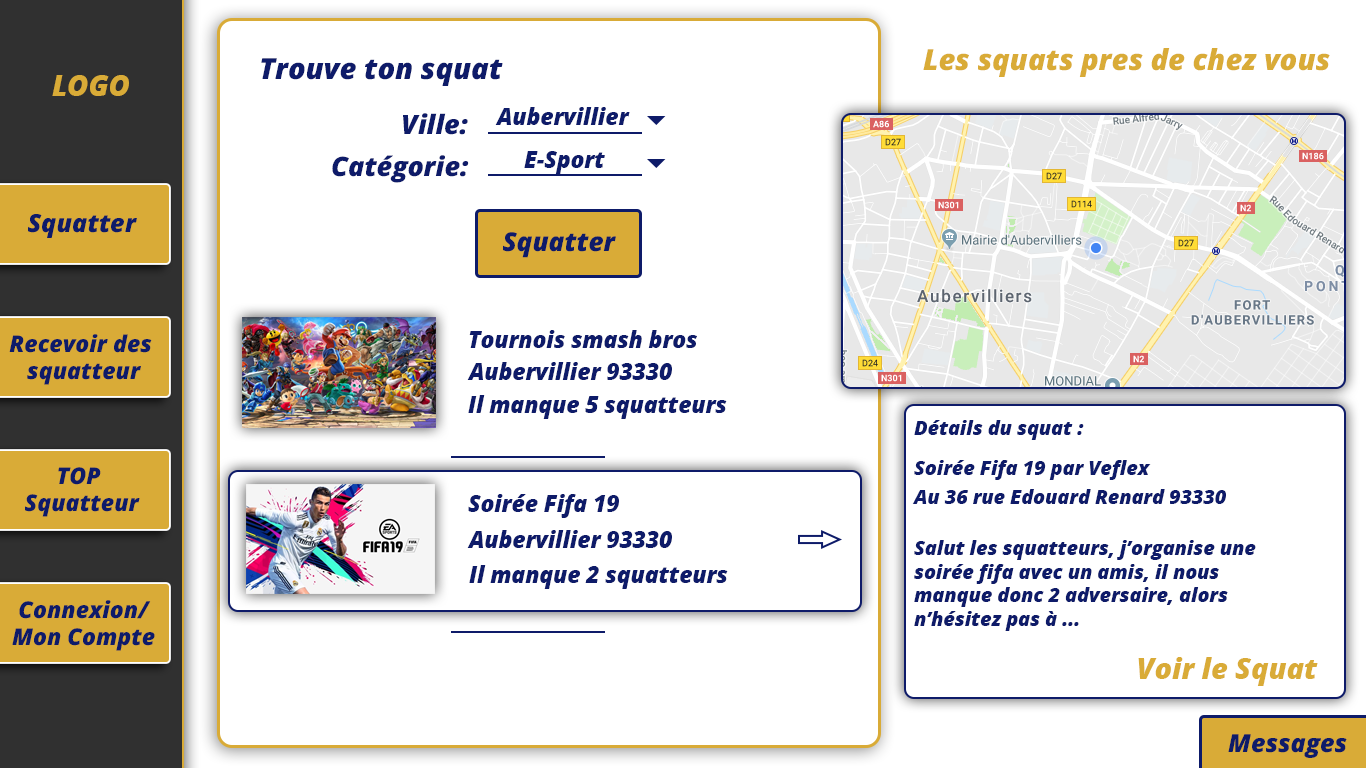
<style>
.page{position:relative;width:1366px;height:768px;background:#ffffff}
.page>*{position:absolute;margin:0}
.t1{font:29px "OpenSans-ExtraBoldItalic";color:#d9ab37}
.t2{font:29px "OpenSans-ExtraBoldItalic";color:#0e1b69}
.t3{font:28.9px "OpenSans-ExtraBoldItalic";color:#d9ab37}
.t4{font:26.8px "OpenSans-ExtraBoldItalic";color:#0e1b69}
.t5{font:22.7px "OpenSans-ExtraBoldItalic";color:#0e1b69}
.t6{font:25px "OpenSans-ExtraBoldItalic";color:#0e1b69}
.t7{font:26px "OpenSans-ExtraBoldItalic";color:#0e1b69}
.t8{font:23px "OpenSans-ExtraBoldItalic";color:#0e1b69}
.t9{font:19.7px "OpenSans-ExtraBoldItalic";color:#0e1b69}
</style>
<div class="page">
<p class="t1" style="left:923px;top:48px;width:407px;height:29px">Les squats pres de chez vous</p>
<p class="t2" style="left:261px;top:58px;width:242px;height:28px">Trouve ton squat</p>
<p class="t3" style="left:52px;top:75px;width:77px;height:21px">LOGO</p>
<p class="t4" style="left:403px;top:113px;width:65px;height:22px">Ville:</p>
<p class="t5" style="left:495px;top:107px;width:135px;height:18px">Aubervillier</p>
<p class="t4" style="left:332px;top:155px;width:137px;height:28px">Catégorie:</p>
<p class="t5" style="left:524px;top:151px;width:81px;height:23px">E-Sport</p>
<p class="t6" style="left:28px;top:214px;width:109px;height:24px">Squatter</p>
<p class="t7" style="left:503px;top:232px;width:113px;height:26px">Squatter</p>
<p class="t8" style="left:9px;top:334px;width:143px;height:51px;text-align:center">Recevoir des <br>squatteur</p>
<p class="t5" style="left:469px;top:330px;width:228px;height:18px">Tournois smash bros<br>*</p>
<p class="t5" style="left:467px;top:362px;width:205px;height:18px">Aubervillier 93330</p>
<p class="t5" style="left:468px;top:395px;width:259px;height:24px">Il manque 5 squatteurs</p>
<p class="t9" style="left:914px;top:420px;width:170px;height:20px">Détails du squat :</p>
<p class="t9" style="left:914px;top:460px;width:237px;height:20px">Soirée Fifa 19 par Veflex</p>
<p class="t8" style="left:25px;top:467px;width:115px;height:50px;text-align:center">TOP <br>Squatteur</p>
<p class="t5" style="left:468px;top:494px;width:151px;height:24px">Soirée Fifa 19</p>
<p class="t9" style="left:912px;top:489px;width:314px;height:15px">Au 36 rue Edouard Renard 93330</p>
<p class="t5" style="left:467px;top:530px;width:205px;height:18px">Aubervillier 93330</p>
<p class="t9" style="left:914px;top:540px;width:342px;height:91px">Salut les squatteurs, j’organise une <br>soirée fifa avec un amis, il nous <br>manque donc 2 adversaire, alors <br>n’hésitez pas à ...</p>
<p class="t5" style="left:469px;top:565px;width:259px;height:24px">Il manque 2 squatteurs</p>
<p class="t8" style="left:12px;top:600px;width:143px;height:51px;text-align:center">Connexion/<br>Mon Compte</p>
<p class="t3" style="left:1138px;top:657px;width:180px;height:29px">Voir le Squat</p>
<p class="t6" style="left:1228px;top:734px;width:119px;height:24px">Messages</p>
</div>
